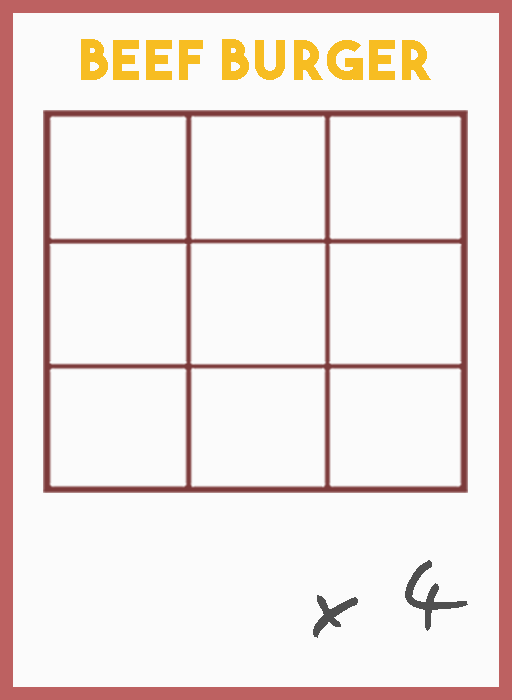
<style>
.page{position:relative;width:512px;height:700px;background:#fbfbfb}
.page>*{position:absolute;margin:0}
.t1{font:54.5px "TheBoldFont";letter-spacing:0.05em;color:#f7bd22}
.t2{font:106.1px "EasySpeech";letter-spacing:0.05em;color:#4f4f4f}
</style>
<div class="page">
<p class="t1" style="left:81px;top:39px;width:350px;height:41px">beef burger</p>
<p class="t2" style="left:313px;top:560px;width:155px;height:78px">x 4</p>
</div>
